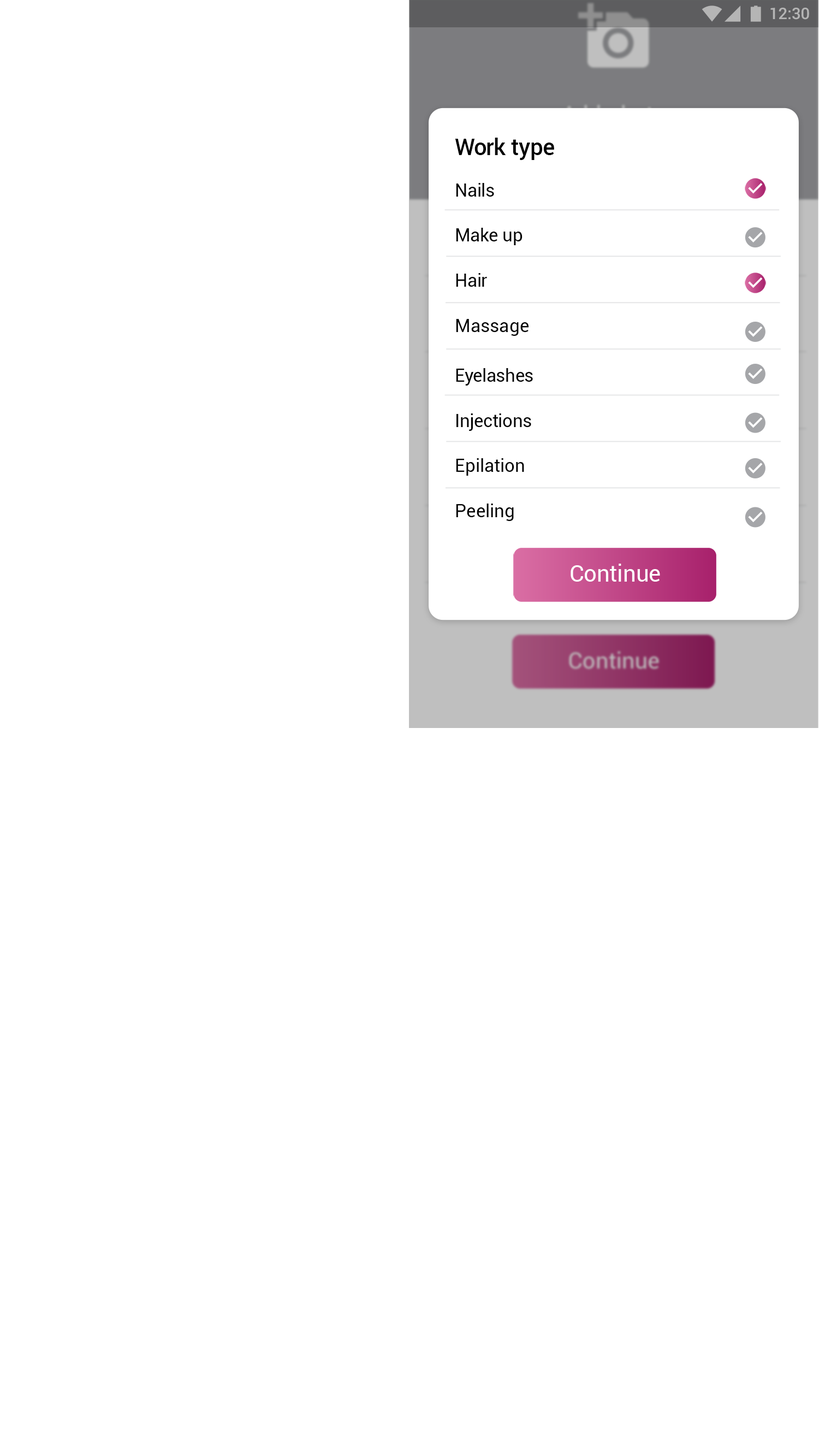
<style>
.page{position:relative;width:819px;height:1456px;background:#ffffff}
.page>*{position:absolute;margin:0}
.t1{font:15.9px "Roboto-Medium";color:#b5b5b5}
.t2{font:22.7px "Roboto-Medium";letter-spacing:-0.005em;color:#000000}
.t3{font:18.2px "Roboto-Regular";letter-spacing:-0.005em;color:#000000}
.t4{font:18.2px "Roboto-Regular";letter-spacing:0.01em;color:#000000}
.t5{font:22.7px "Roboto-Regular";color:#ffffff}
</style>
<div class="page">
<p class="t1" style="left:770px;top:8px;width:39px;height:12px">12:30</p>
<p class="t2" style="left:455px;top:138px;width:99px;height:22px">Work type</p>
<p class="t3" style="left:456px;top:183px;width:38px;height:14px">Nails</p>
<p class="t3" style="left:456px;top:228px;width:67px;height:17px">Make up</p>
<p class="t3" style="left:456px;top:273px;width:31px;height:14px">Hair</p>
<p class="t4" style="left:456px;top:319px;width:73px;height:17px">Massage</p>
<p class="t3" style="left:456px;top:368px;width:77px;height:18px">Eyelashes</p>
<p class="t3" style="left:457px;top:413px;width:74px;height:18px">Injections</p>
<p class="t4" style="left:456px;top:458px;width:68px;height:18px">Epilation</p>
<p class="t4" style="left:456px;top:503px;width:58px;height:18px">Peeling</p>
<p class="t5" style="left:571px;top:564px;width:89px;height:18px">Continue</p>
</div>
